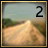
<style>
.page{position:relative;width:48px;height:48px}
.page>*{position:absolute;margin:0}
.t1{font:14px "MicrosoftYaHei";color:#000000}
</style>
<div class="page">
<p class="t1" style="left:36px;top:6px;width:7px;height:11px">2</p>
</div>
